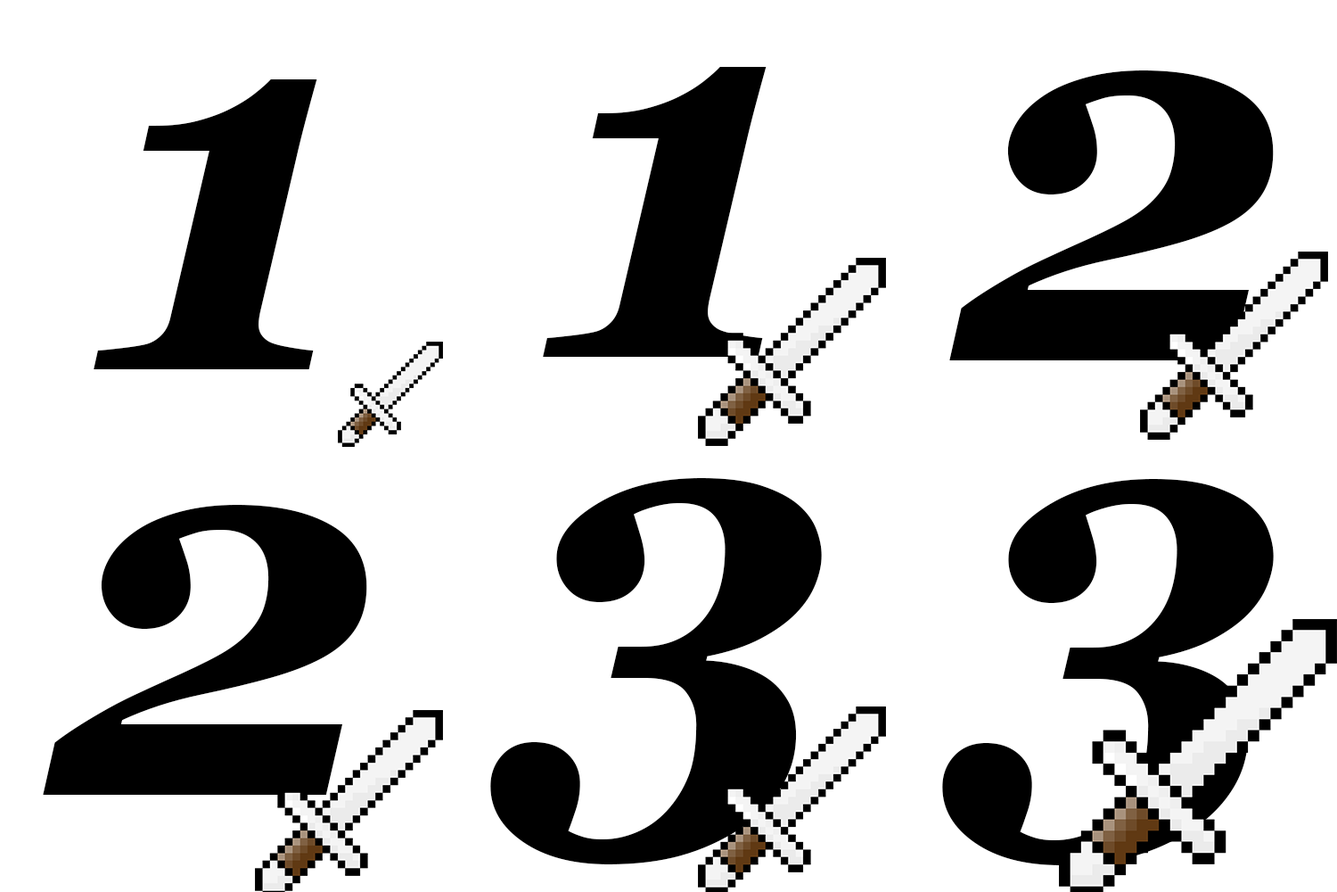
<style>
.page{position:relative;width:1337px;height:892px;background:#ffffff}
.page>*{position:absolute;margin:0}
.t1{font:535px "Georgia-BoldItalic";color:#000000}
</style>
<div class="page">
<p class="t1" style="left:543px;top:67px;width:224px;height:290px">1</p>
<p class="t1" style="left:950px;top:70px;width:324px;height:290px">2</p>
<p class="t1" style="left:94px;top:79px;width:223px;height:290px">1</p>
<p class="t1" style="left:490px;top:478px;width:332px;height:386px">3</p>
<p class="t1" style="left:942px;top:479px;width:332px;height:386px">3</p>
<p class="t1" style="left:43px;top:505px;width:324px;height:289px">2</p>
</div>
